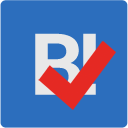
<style>
.page{position:relative;width:128px;height:128px;background:#2c6ebd}
.page>*{position:absolute;margin:0}
.t1{font:85.3px "Roboto-Bold";letter-spacing:-0.05em;color:#e8e8e8}
</style>
<div class="page">
<p class="t1" style="left:35px;top:33px;width:61px;height:62px">B!</p>
</div>
